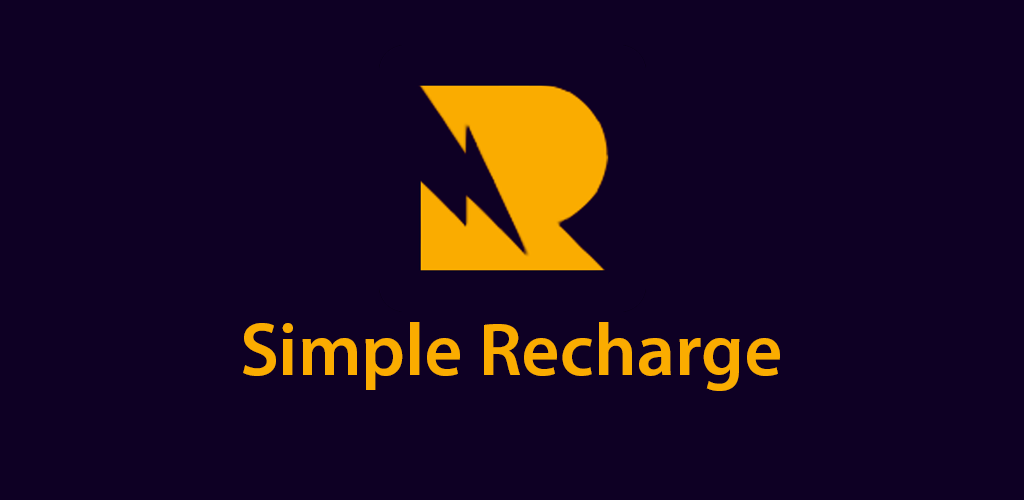
<style>
.page{position:relative;width:1024px;height:500px;background:#0e0024}
.page>*{position:absolute;margin:0}
.t1{font:75px "MyriadPro-Semibold";color:#faac00}
</style>
<div class="page">
<p class="t1" style="left:243px;top:322px;width:537px;height:69px">Simple Recharge</p>
</div>
